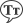
<style>
.page{position:relative;width:23px;height:23px;background:#ffffff}
.page>*{position:absolute;margin:0}
.t1{font:14px "TimesNewRomanPS-BoldMT";color:#383838;text-transform:uppercase}
.t2{font:14px "TimesNewRomanPS-BoldMT";color:#383838;font-variant:small-caps}
</style>
<div class="page">
<p class="t1" style="left:3px;top:5px;width:17px;height:10px">t<span class="t2">t</span></p>
</div>
